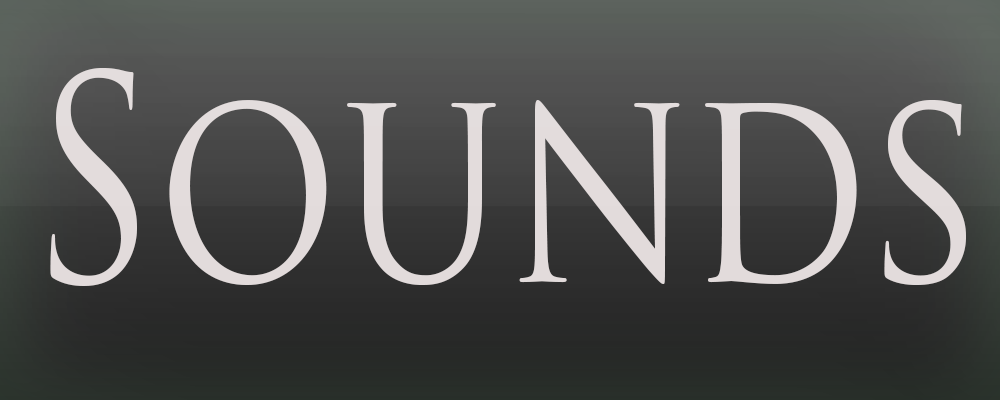
<style>
.page{position:relative;width:1000px;height:400px}
.page>*{position:absolute;margin:0}
.t1{font:277.1px "TrajanPro-Regular";color:#e2dbdb;scale:0.81 1}
</style>
<div class="page">
<p class="t1" style="left:50px;top:67px;width:916px;height:219px">Sounds</p>
</div>
